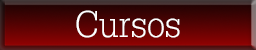
<style>
.page{position:relative;width:256px;height:50px}
.page>*{position:absolute;margin:0}
.t1{font:56.3px "DilleniaUPC";color:#ffffff}
</style>
<div class="page">
<p class="t1" style="left:76px;top:10px;width:104px;height:28px">Cursos</p>
</div>
